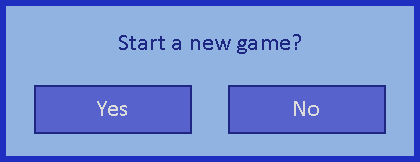
<style>
.page{position:relative;width:420px;height:162px;background:#90b3e2}
.page>*{position:absolute;margin:0}
.t1{font:24px "Calibri";letter-spacing:0.01em;color:#1e2883}
.t2{font:24px "Calibri";letter-spacing:0.01em;color:#dcdcdc}
.t3{font:24px "Calibri";letter-spacing:-0.025em;color:#dcdcdc}
</style>
<div class="page">
<p class="t1" style="left:119px;top:34px;width:182px;height:20px">Start a new game?</p>
<p class="t2" style="left:97px;top:101px;width:30px;height:15px">Yes</p>
<p class="t3" style="left:294px;top:101px;width:25px;height:15px">No</p>
</div>
